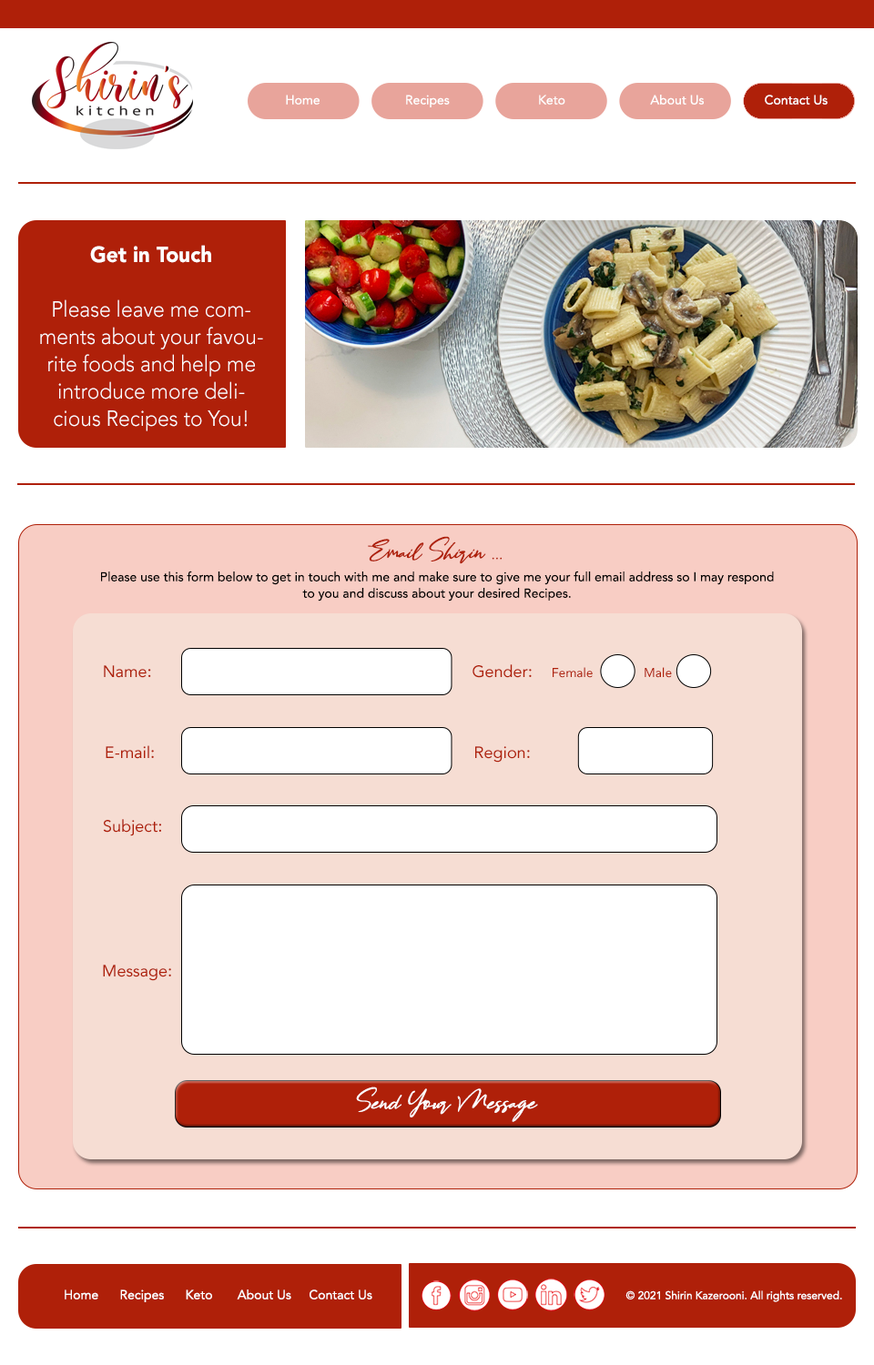
<style>
.page{position:relative;width:874px;height:1365px;background:#ffffff}
.page>*{position:absolute;margin:0}
.t1{font:12.7px "Avenir-Roman";color:#ffffff}
.t2{font:21.8px/27.3px "Avenir-Light";color:#ffffff;scale:0.95 1}
.t3{font:21.8px/27.3px "Avenir-Black";color:#ffffff;scale:0.95 1}
.t4{font:21.8px "Bestowensfamily";color:#af2009}
.t5{font:12.7px/16.4px "Avenir-Roman";color:#000000}
.t6{font:16.4px "Avenir-Roman";color:#af2009}
.t7{font:12.7px "Avenir-Roman";color:#af2009}
.t8{font:21.8px "Bestowensfamily";color:#ffffff}
.t9{font:10.9px "Avenir-Roman";color:#ffffff}
</style>
<div class="page">
<p class="t1" style="left:286px;top:95px;width:541px;height:12px">Home                        Recipes                         Keto                        About Us                 Contact Us</p>
<p class="t2" style="left:40px;top:245px;width:223px;height:186px;text-align:center"><span class="t3">Get in Touch<br><br></span>Please leave me comments about your favourite foods and help me introduce more delicious Recipes to You!</p>
<p class="t4" style="left:368px;top:536px;width:134px;height:28px">Email Shirin ...</p>
<p class="t5" style="left:101px;top:571px;width:672px;height:31px;text-align:center">Please use this form below to get in touch with me and make sure to give me your full email address so I may respond to you and discuss about your desired Recipes.</p>
<p class="t6" style="left:104px;top:665px;width:47px;height:13px">Name:</p>
<p class="t6" style="left:472px;top:664px;width:59px;height:14px">Gender:</p>
<p class="t7" style="left:552px;top:667px;width:40px;height:11px">Female</p>
<p class="t7" style="left:644px;top:667px;width:28px;height:11px">Male</p>
<p class="t6" style="left:106px;top:745px;width:48px;height:14px">E-mail:</p>
<p class="t6" style="left:475px;top:746px;width:55px;height:17px">Region:</p>
<p class="t6" style="left:103px;top:819px;width:58px;height:17px">Subject:</p>
<p class="t6" style="left:103px;top:965px;width:68px;height:16px">Message:</p>
<p class="t8" style="left:356px;top:1087px;width:182px;height:35px">Send Your Message</p>
<p class="t1" style="left:65px;top:1289px;width:307px;height:13px">Home      Recipes      Keto       About Us     Contact Us</p>
<p class="t9" style="left:625px;top:1290px;width:217px;height:12px">© 2021 Shirin Kazerooni. All rights reserved.</p>
</div>
